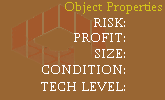
<style>
.page{position:relative;width:165px;height:100px;background:#996633}
.page>*{position:absolute;margin:0}
.t1{font:14px "Sylfaen";color:#d3c41a}
.t2{font:14px "Sylfaen";color:#ffffff}
</style>
<div class="page">
<p class="t1" style="left:65px;top:2px;width:97px;height:12px">Object Properties</p>
<p class="t2" style="left:94px;top:18px;width:31px;height:9px">RISK:</p>
<p class="t2" style="left:74px;top:33px;width:51px;height:9px">PROFIT:</p>
<p class="t2" style="left:95px;top:49px;width:30px;height:9px">SIZE:</p>
<p class="t2" style="left:42px;top:65px;width:83px;height:9px">CONDITION:</p>
<p class="t2" style="left:41px;top:82px;width:84px;height:9px">TECH LEVEL:</p>
</div>
